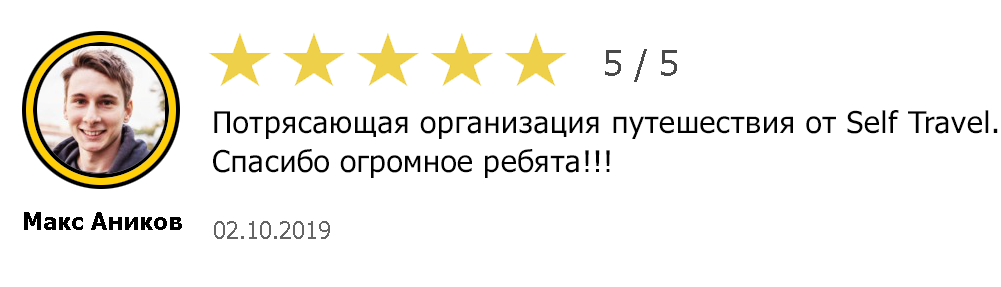
<style>
.page{position:relative;width:1001px;height:287px;background:#ffffff}
.page>*{position:absolute;margin:0}
.t1{font:36px "Tahoma";color:#494949}
.t2{font:30px/19.5px "Tahoma";letter-spacing:0.02em;color:#010101}
.t3{font:24px "Tahoma-Bold";color:#000000}
.t4{font:24px "Tahoma";color:#656565}
</style>
<div class="page">
<p class="t1" style="left:605px;top:49px;width:72px;height:33px">5 / 5</p>
<p class="t2" style="left:213px;top:110px;width:785px;height:68px">Потрясающая организация путешествия от Self Travel.<br><br>Спасибо огромное ребята!!!</p>
<p class="t3" style="left:24px;top:212px;width:158px;height:18px">Макс Аников</p>
<p class="t4" style="left:214px;top:221px;width:116px;height:18px">02.10.2019</p>
</div>
